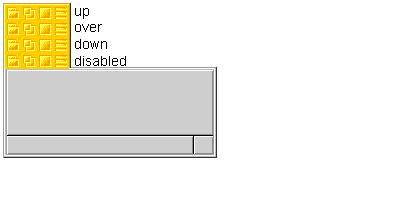
<style>
.page{position:relative;width:400px;height:200px;background:#ffffff}
.page>*{position:absolute;margin:0}
.t1{font:14px "ArialMT";color:#000000}
</style>
<div class="page">
<p class="t1" style="left:75px;top:8px;width:51px;height:58px">up<br>over<br>down<br>disabled</p>
</div>
